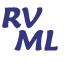
<style>
.page{position:relative;width:64px;height:64px;background:#ffffff}
.page>*{position:absolute;margin:0}
.t1{font:28.6px "MaiandraGD-DemiBold";color:#36367e;font-style:italic}
</style>
<div class="page">
<p class="t1" style="left:2px;top:7px;width:41px;height:22px">RVMLML</p>
<p class="t1" style="left:14px;top:30px;width:44px;height:21px">ML</p>
</div>
